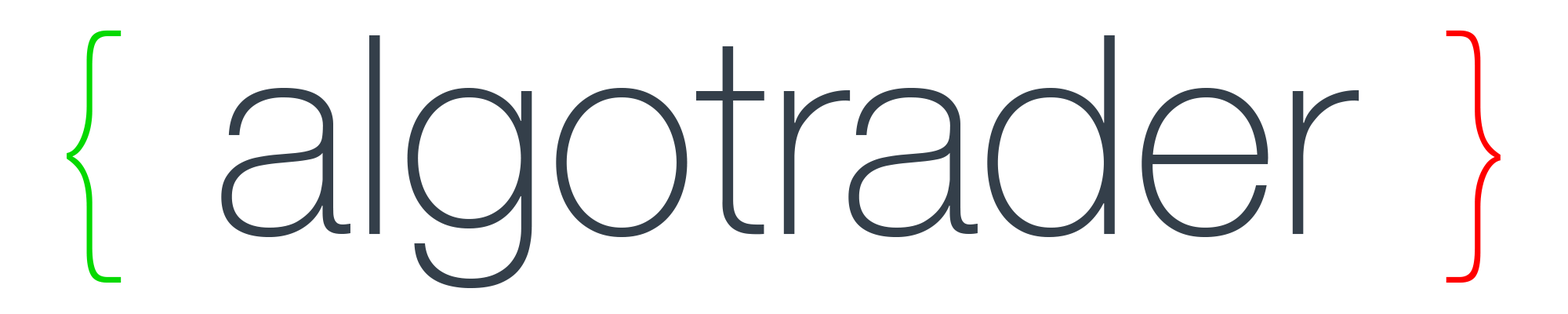
<style>
.page{position:relative;width:1568px;height:314px;background:#ffffff}
.page>*{position:absolute;margin:0}
.t1{font:277.7px "HelveticaNeue-Thin";color:#343f4a}
.t2{font:277.7px "HelveticaNeue-UltraLight";color:#05d900}
.t3{font:277.7px "HelveticaNeue-UltraLight";color:#ff0000}
</style>
<div class="page">
<p class="t1" style="left:67px;top:30px;width:1434px;height:258px"><span class="t2">{ </span>algotrader <span class="t3">}</span></p>
</div>
